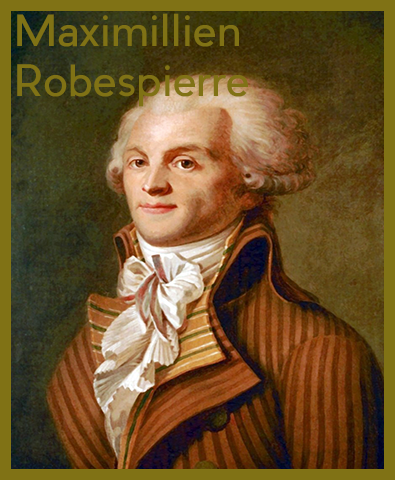
<style>
.page{position:relative;width:395px;height:480px}
.page>*{position:absolute;margin:0}
.t1{font:42px "PierSans";color:#807215}
</style>
<div class="page">
<p class="t1" style="left:17px;top:13px;width:231px;height:94px">Maximillien<br>Robespierre</p>
</div>
